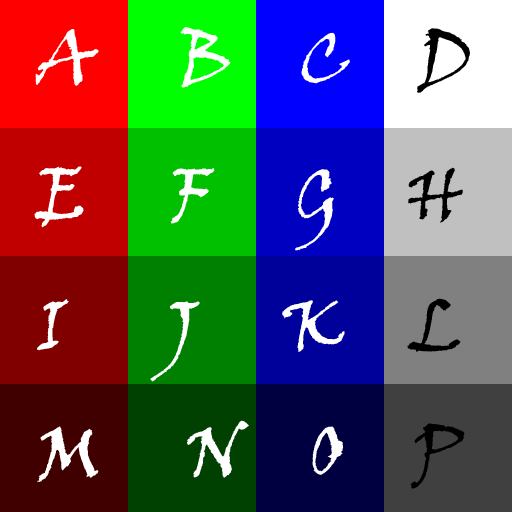
<style>
.page{position:relative;width:512px;height:512px}
.page>*{position:absolute;margin:0}
.t1{font:72px "VinerHandITC";color:#ffffff}
.t2{font:72px "VinerHandITC";color:#000000}
</style>
<div class="page">
<p class="t1" style="left:37px;top:298px;width:424px;height:84px">I      J     K    <span class="t2">L</span></p>
<p class="t1" style="left:37px;top:420px;width:428px;height:69px">M     N    O    <span class="t2">P</span></p>
</div>
